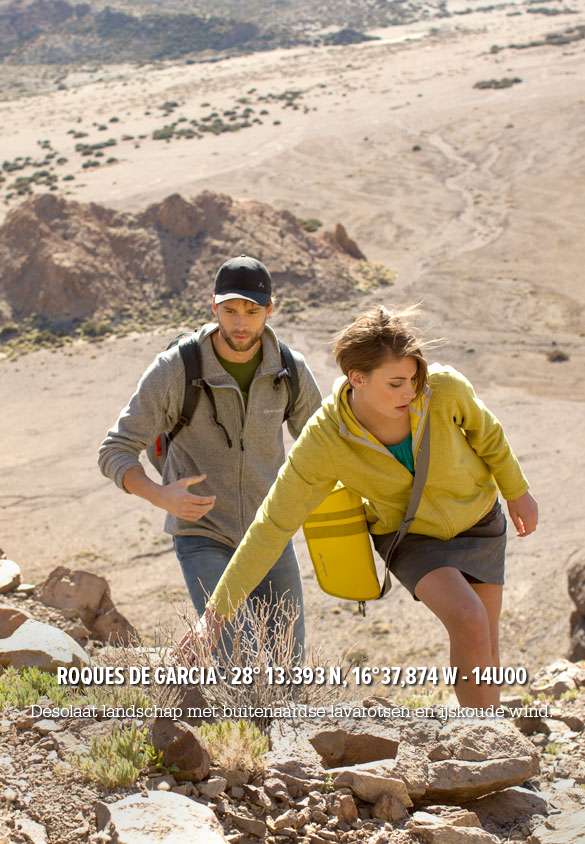
<style>
.page{position:relative;width:585px;height:844px}
.page>*{position:absolute;margin:0}
.t1{font:18.4px/16.3px "SerifaStd-Light";color:#ffffff}
.t2{font:25.5px/16.3px "ProximaNovaExCn-Bold";color:#ffffff}
</style>
<div class="page">
<p class="t1" style="left:30px;top:667px;width:522px;height:53px;text-align:center"><span class="t2">ROQUES DE GARCIA - 28° 13.393 N, 16°37,874 W - 14U00<br><br></span>Desolaat landschap met buitenaardse lavarotsen en ijskoude wind.</p>
</div>
